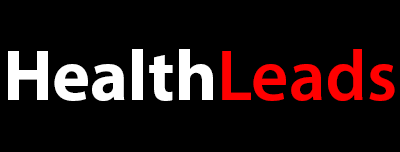
<style>
.page{position:relative;width:400px;height:152px;background:#000000}
.page>*{position:absolute;margin:0}
.t1{font:72px "MyriadPro-Bold";color:#ffffff}
.t2{font:72px "MyriadPro-Semibold";color:#ff0000}
</style>
<div class="page">
<p class="t1" style="left:8px;top:49px;width:387px;height:52px">Health<span class="t2">Leads</span></p>
</div>
